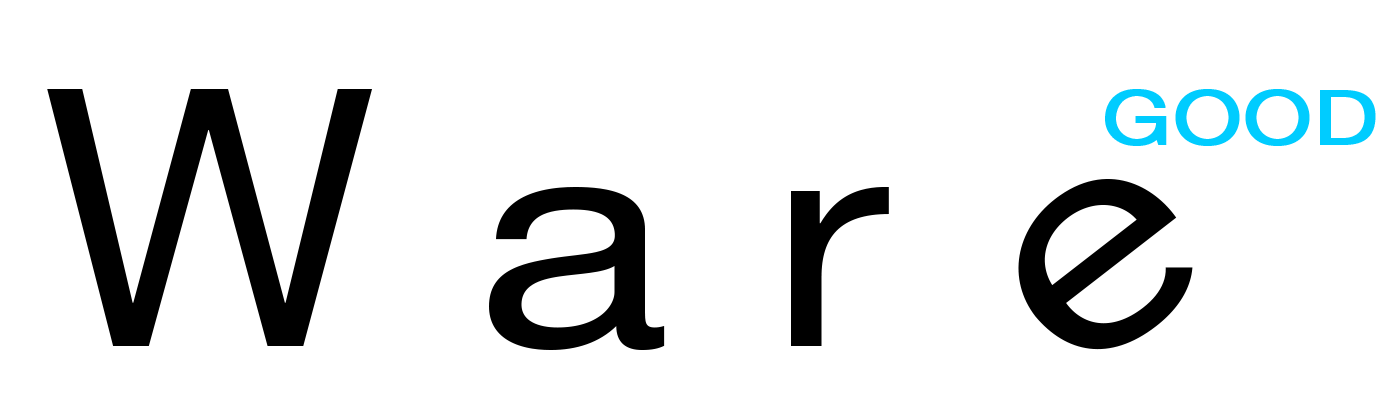
<style>
.page{position:relative;width:1379px;height:400px;background:#ffffff}
.page>*{position:absolute;margin:0}
.t1{font:300px "HelveticaNeueLTStd-Roman";color:#000000;scale:1.2 1}
.t2{font:360px "HelveticaNeueLTStd-Roman";color:#000000}
.t3{font:75px "HelveticaNeueLTStd-Roman";color:#00ccff;font-weight:bold;scale:1.2 1}
</style>
<div class="page">
<p class="t1" style="left:47px;top:89px;width:842px;height:261px"><span class="t2">W </span>a r</p>
<p class="t3" style="left:1105px;top:89px;width:271px;height:57px">GOOD</p>
</div>
